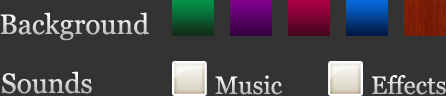
<style>
.page{position:relative;width:446px;height:96px;background:#333333}
.page>*{position:absolute;margin:0}
.t1{font:28px "Georgia";color:#d7d7d7}
.t2{font:25px "Georgia";color:#d7d7d7}
</style>
<div class="page">
<p class="t1" style="left:0px;top:12px;width:149px;height:29px">Background</p>
<p class="t1" style="left:2px;top:71px;width:90px;height:23px">Sounds</p>
<p class="t2" style="left:215px;top:75px;width:67px;height:20px">Music</p>
<p class="t2" style="left:372px;top:75px;width:74px;height:20px">Effects</p>
</div>
